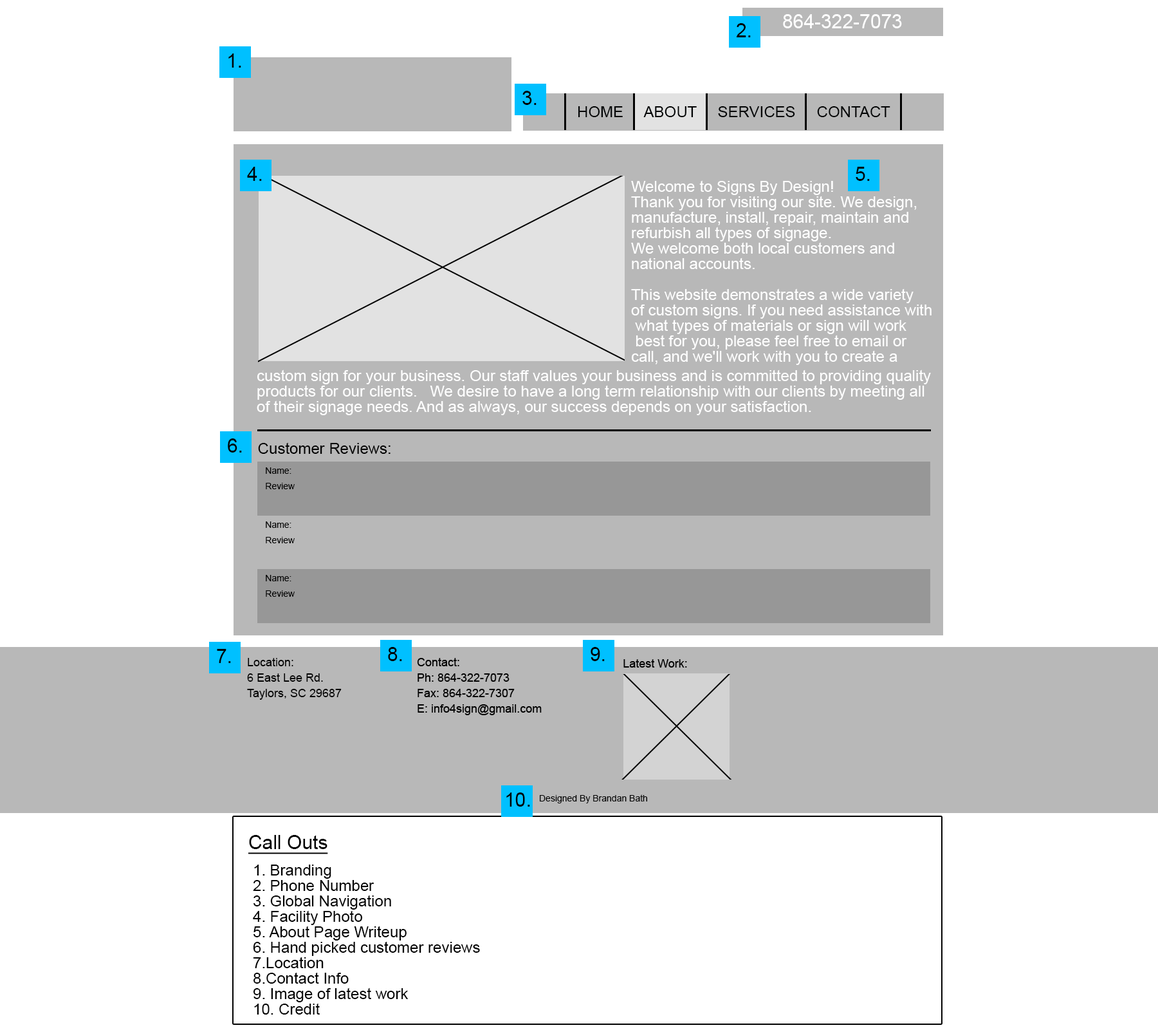
<style>
.page{position:relative;width:1158px;height:1030px;background:#ffffff}
.page>*{position:absolute;margin:0}
.t1{font:19.3px "ArialMT";color:#ffffff}
.t2{font:19.3px "ArialMT";color:#000203}
.t3{font:15.4px "ArialMT";color:#000203}
.t4{font:15.4px/15.4px "ArialMT";color:#ffffff}
.t5{font:15.4px "ArialMT";color:#000000}
.t6{font:9px/15.4px "ArialMT";color:#000000}
.t7{font:11.6px/15.4px "ArialMT";color:#000000}
.t8{font:9px "ArialMT";color:#000000}
.t9{font:19.3px "ArialMT";color:#000000;text-decoration:underline}
.t10{font:15.4px/15.4px "ArialMT";color:#000000}
</style>
<div class="page">
<p class="t1" style="left:783px;top:14px;width:119px;height:14px">864-322-7073</p>
<p class="t2" style="left:736px;top:23px;width:15px;height:14px">2.</p>
<p class="t2" style="left:228px;top:53px;width:13px;height:15px">1.</p>
<p class="t2" style="left:522px;top:91px;width:15px;height:14px">3.</p>
<p class="t3" style="left:578px;top:106px;width:313px;height:15px">HOME  |  ABOUT  |  SERVICES  |  CONTACT</p>
<p class="t2" style="left:247px;top:167px;width:15px;height:14px">4.</p>
<p class="t2" style="left:856px;top:167px;width:14px;height:14px">5.</p>
<p class="t4" style="left:631px;top:180px;width:301px;height:185px">Welcome to Signs By Design!<br>Thank you for visiting our site. We design, <br>manufacture, install, repair, maintain and <br>refurbish all types of signage.<br>We welcome both local customers and <br>national accounts.<br><br>This website demonstrates a wide variety <br>of custom signs. If you need assistance with<br> what types of materials or sign will work<br> best for you, please feel free to email or <br>call, and we'll work with you to create a</p>
<p class="t4" style="left:257px;top:369px;width:674px;height:46px">custom sign for your business. Our staff values your business and is committed to providing quality <br>products for our clients.   We desire to have a long term relationship with our clients by meeting all<br>of their signage needs. And as always, our success depends on your satisfaction.</p>
<p class="t2" style="left:228px;top:438px;width:14px;height:14px">6.</p>
<p class="t5" style="left:258px;top:442px;width:133px;height:12px">Customer Reviews:</p>
<p class="t6" style="left:266px;top:467px;width:29px;height:22px">Name:<br>Review</p>
<p class="t6" style="left:266px;top:521px;width:29px;height:22px">Name:<br>Review</p>
<p class="t6" style="left:266px;top:575px;width:29px;height:21px">Name:<br>Review</p>
<p class="t2" style="left:217px;top:649px;width:14px;height:14px">7.</p>
<p class="t2" style="left:388px;top:647px;width:14px;height:14px">8.</p>
<p class="t2" style="left:591px;top:647px;width:14px;height:14px">9.</p>
<p class="t7" style="left:247px;top:658px;width:95px;height:41px">Location:<br>6 East Lee Rd.<br>Taylors, SC 29687</p>
<p class="t2" style="left:506px;top:792px;width:24px;height:14px">10.</p>
<p class="t8" style="left:540px;top:794px;width:107px;height:9px">Designed By Brandan Bath</p>
<p class="t9" style="left:248px;top:835px;width:80px;height:19px">Call Outs</p>
<p class="t10" style="left:253px;top:864px;width:227px;height:150px">1. Branding<br>2. Phone Number<br>3. Global Navigation<br>4. Facility Photo<br>5. About Page Writeup<br>6. Hand picked customer reviews<br>7.Location<br>8.Contact Info<br>9. Image of latest work<br>10. Credit</p>
</div>
